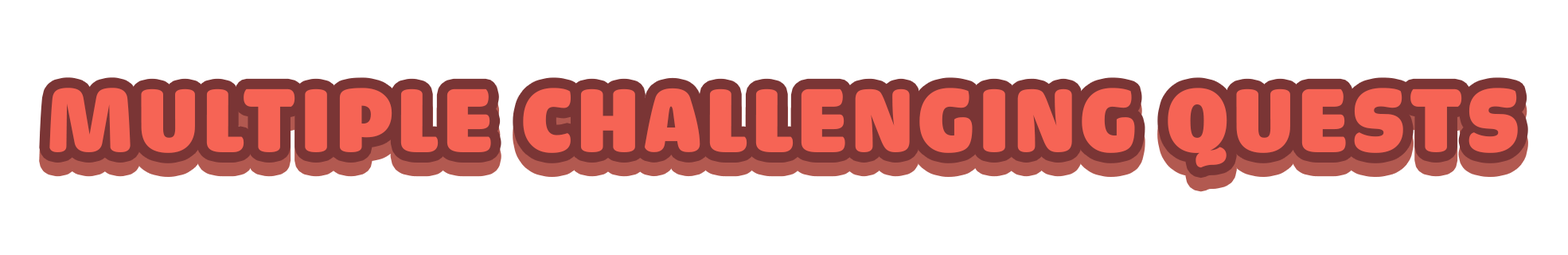
<style>
.page{position:relative;width:1568px;height:255px;background:#ffffff}
.page>*{position:absolute;margin:0}
.t1{font:95.5px "iCielCadena";letter-spacing:0.05em;color:#f66455;text-transform:uppercase}
</style>
<div class="page">
<p class="t1" style="left:49px;top:88px;width:1469px;height:80px">Multiple challenging quests</p>
</div>
